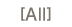
<style>
.page{position:relative;width:72px;height:27px;background:#ffffff}
.page>*{position:absolute;margin:0}
.t1{font:18px "FutoGoB101Pr5-Bold";color:#6e665b}
.t2{font:14.9px "FutoGoB101Pr5-Bold";color:#6e665b;scale:1.2 1}
</style>
<div class="page">
<p class="t1" style="left:21px;top:7px;width:30px;height:14px;opacity:0.9"><span class="t2">[</span>All<span class="t2">]</span></p>
</div>
